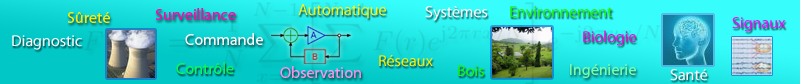
<style>
.page{position:relative;width:800px;height:84px}
.page>*{position:absolute;margin:0}
.t1{font:16px "MyriadPro-Regular";color:#f6f91b}
.t2{font:16px "MyriadPro-Regular";color:#ffffff}
.t3{font:16px "MyriadPro-Regular";color:#19f609}
.t4{font:16px "MyriadPro-Regular";color:#f6ee09}
.t5{font:16px "MyriadPro-Regular";color:#f609b0}
.t6{font:16px "MyriadPro-Regular";color:#ec0bfa}
.t7{font:16px "MyriadPro-Regular";color:#f609e2}
.t8{font:16px "MyriadPro-Regular";color:#fdfefe}
.t9{font:16px "MyriadPro-Regular";color:#09f65c}
.t10{font:16px "MyriadPro-Regular";color:#76ffaa}
.t11{font:16px "MyriadPro-Regular";color:#fd95f0}
</style>
<div class="page">
<p class="t1" style="left:298px;top:4px;width:88px;height:15px">Automatique</p>
<p class="t2" style="left:425px;top:6px;width:63px;height:15px">Systèmes</p>
<p class="t3" style="left:510px;top:6px;width:103px;height:12px">Environnement</p>
<p class="t4" style="left:67px;top:12px;width:43px;height:11px">Sûreté</p>
<p class="t5" style="left:155px;top:8px;width:81px;height:12px">Surveillance</p>
<p class="t6" style="left:732px;top:17px;width:54px;height:15px">Signaux</p>
<p class="t7" style="left:583px;top:30px;width:53px;height:16px">Biologie</p>
<p class="t2" style="left:12px;top:35px;width:70px;height:15px">Diagnostic</p>
<p class="t8" style="left:185px;top:33px;width:78px;height:12px">Commande</p>
<p class="t9" style="left:176px;top:62px;width:58px;height:12px">Contrôle</p>
<p class="t4" style="left:379px;top:55px;width:54px;height:12px">Réseaux</p>
<p class="t3" style="left:458px;top:65px;width:26px;height:12px">Bois</p>
<p class="t10" style="left:570px;top:64px;width:66px;height:14px">Ingénierie</p>
<p class="t11" style="left:280px;top:66px;width:81px;height:12px">Observation</p>
<p class="t2" style="left:670px;top:69px;width:38px;height:12px">Santé</p>
</div>
